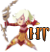
<style>
.page{position:relative;width:50px;height:52px;background:#ffffff}
.page>*{position:absolute;margin:0}
.t1{font:13.3px "QUAKE2"}
</style>
<div class="page">
<p class="t1" style="left:29px;top:28px;width:20px;height:13px">HT</p>
</div>
